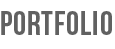
<style>
.page{position:relative;width:115px;height:49px;background:#ffffff}
.page>*{position:absolute;margin:0}
.t1{font:33.3px "BebasNeue";letter-spacing:0.025em;color:#616161}
</style>
<div class="page">
<p class="t1" style="left:1px;top:11px;width:111px;height:24px">PORTFOLIO</p>
</div>
